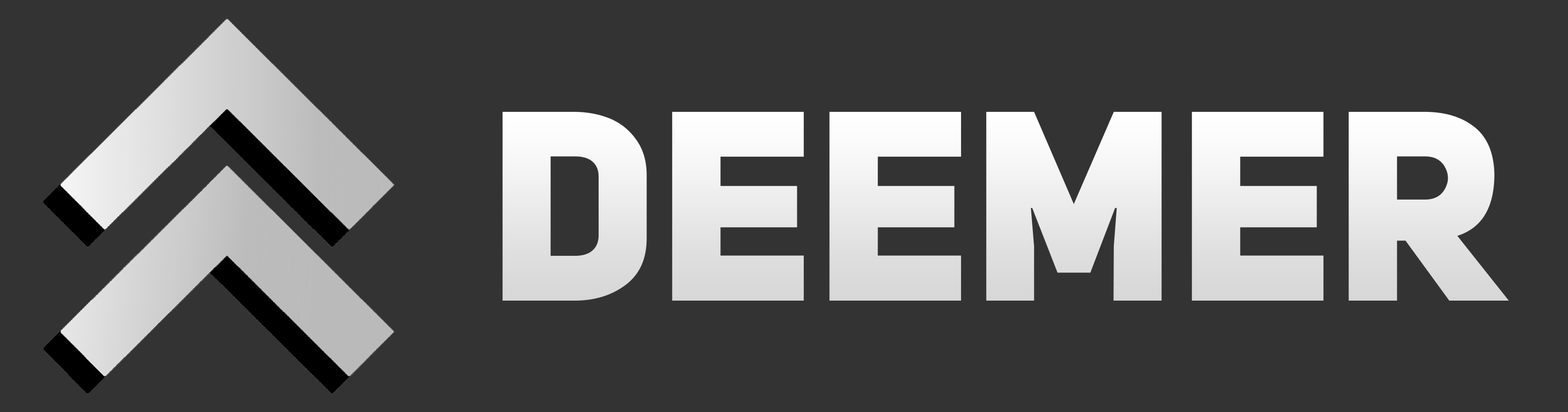
<style>
.page{position:relative;width:1568px;height:412px;background:#333333}
.page>*{position:absolute;margin:0}
.t1{font:267px "UniSansHeavyCAPS";color:#ffffff}
</style>
<div class="page">
<p class="t1" style="left:502px;top:111px;width:1007px;height:190px">DEEMER</p>
</div>
